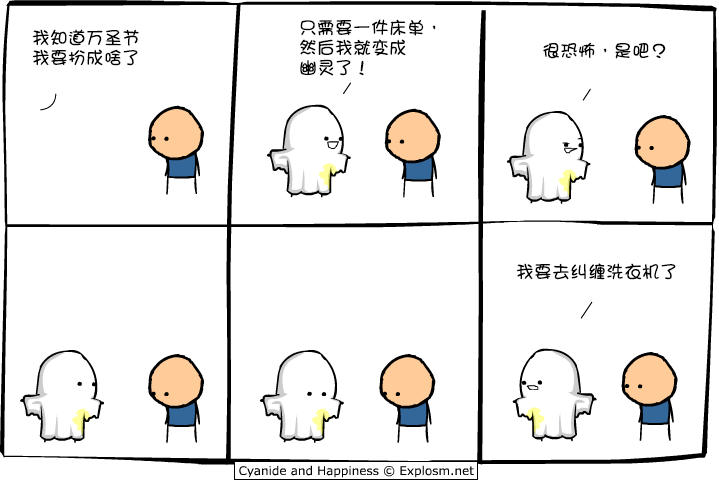
<style>
.page{position:relative;width:719px;height:485px;background:#ffffff}
.page>*{position:absolute;margin:0}
.t1{font:18px/20px "DFGirl";color:#000000}
.t2{font:18px "DFGirl";color:#000000}
</style>
<div class="page">
<p class="t1" style="left:32px;top:29px;width:107px;height:37px">我知道万圣节<br>我要扮成啥了</p>
<p class="t1" style="left:300px;top:19px;width:136px;height:57px">只需要一件床单，<br>然后我就变成<br>幽灵了！</p>
<p class="t2" style="left:543px;top:42px;width:123px;height:17px">很恐怖，是吧？</p>
<p class="t2" style="left:516px;top:263px;width:160px;height:17px">我要去纠缠洗衣机了</p>
</div>
